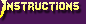
<style>
.page{position:relative;width:86px;height:24px;background:#4c1457}
.page>*{position:absolute;margin:0}
.t1{font:16px "Lady-Radical"}
</style>
<div class="page">
<p class="t1" style="left:0px;top:0px;width:79px;height:18px">Instructions</p>
</div>
